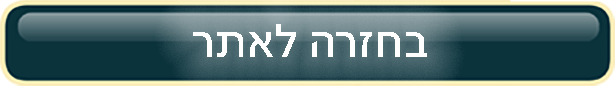
<style>
.page{position:relative;width:615px;height:86px}
.page>*{position:absolute;margin:0}
.t1{font:48px "NarkissTam-Medium";color:#ffffff}
</style>
<div class="page">
<p class="t1" style="left:193px;top:24px;width:234px;height:33px">בחזרה לאתר</p>
</div>
